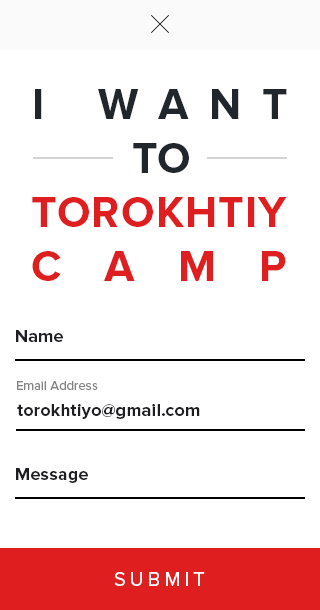
<style>
.page{position:relative;width:320px;height:610px;background:#ffffff}
.page>*{position:absolute;margin:0}
.t1{font:44px "ProximaNova-Bold";letter-spacing:0.483em;color:#21262c}
.t2{font:44px "ProximaNova-Bold";color:#21262c}
.t3{font:44px "ProximaNova-Bold";letter-spacing:0.025em;color:#df1f1f}
.t4{font:44px "ProximaNova-Bold";letter-spacing:0.99em;color:#df1f1f}
.t5{font:18px "ProximaNova-Bold";letter-spacing:0.005em;color:#1d1d22}
.t6{font:13px "ProximaNova-Regular";letter-spacing:0.005em;color:#838383}
.t7{font:20px "ProximaNova-Regular";letter-spacing:0.2em;color:#ffffff}
</style>
<div class="page">
<p class="t1" style="left:35px;top:89px;width:252px;height:30px">I WANT</p>
<p class="t2" style="left:133px;top:143px;width:56px;height:30px">TO</p>
<p class="t3" style="left:32px;top:197px;width:255px;height:30px">TOROKHTIY</p>
<p class="t4" style="left:32px;top:251px;width:254px;height:30px">CAMP</p>
<p class="t5" style="left:16px;top:330px;width:47px;height:12px">Name</p>
<p class="t6" style="left:17px;top:381px;width:81px;height:9px">Email Address</p>
<p class="t5" style="left:17px;top:404px;width:183px;height:15px">torokhtiyo@gmail.com</p>
<p class="t5" style="left:16px;top:468px;width:72px;height:15px">Message</p>
<p class="t7" style="left:114px;top:572px;width:91px;height:14px">SUBMIT</p>
</div>
